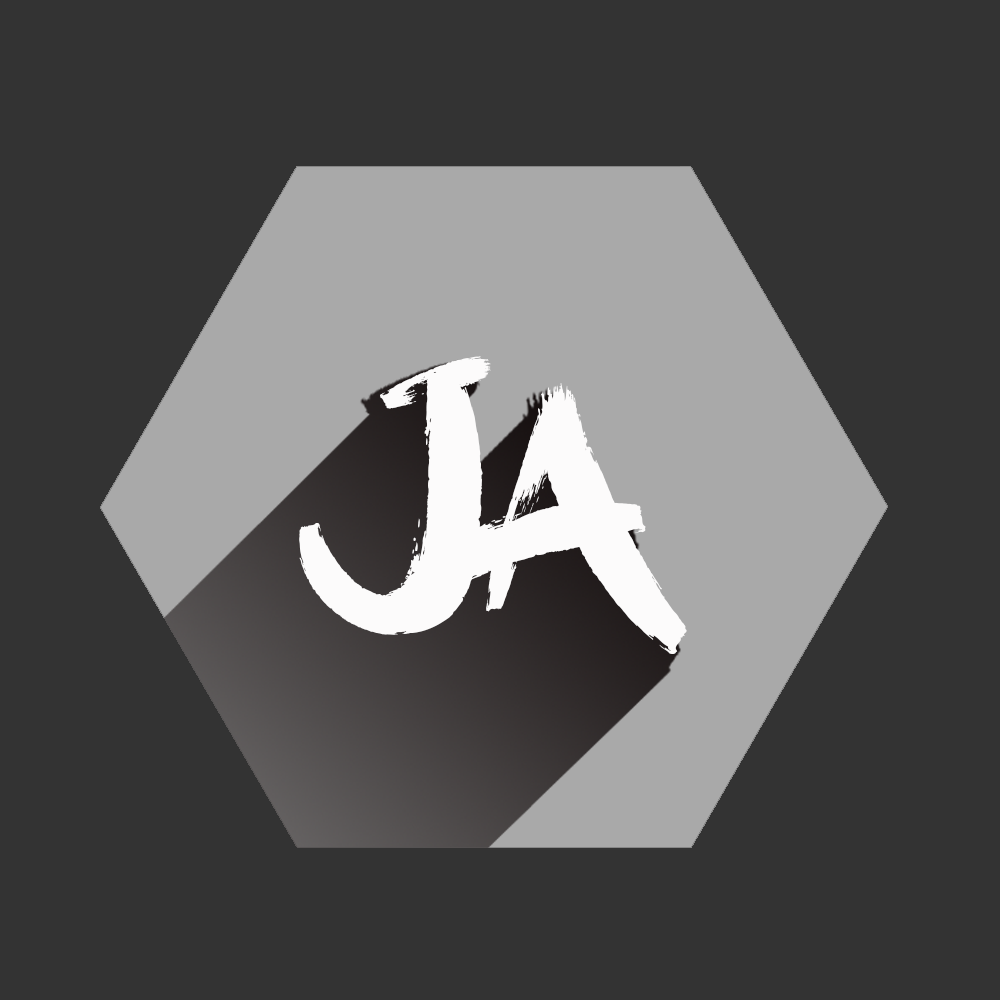
<style>
.page{position:relative;width:1000px;height:1000px;background:#333333}
.page>*{position:absolute;margin:0}
.t1{font:314px "BllodyRainan";color:#fcfbfb}
</style>
<div class="page">
<p class="t1" style="left:299px;top:356px;width:388px;height:298px">JA</p>
</div>
